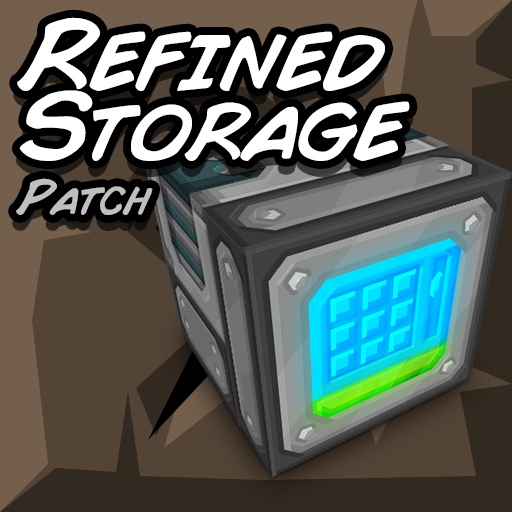
<style>
.page{position:relative;width:512px;height:512px}
.page>*{position:absolute;margin:0}
.t1{font:97.1px/69.8px "ComicBook-Italic";letter-spacing:-0.04em;color:#ffffff}
.t2{font:48px "ComicBook-Italic";letter-spacing:-0.04em;color:#bfbfbf}
</style>
<div class="page">
<p class="t1" style="left:17px;top:17px;width:393px;height:144px">Refined<br>Storage</p>
<p class="t2" style="left:16px;top:178px;width:137px;height:37px">Patch</p>
</div>
